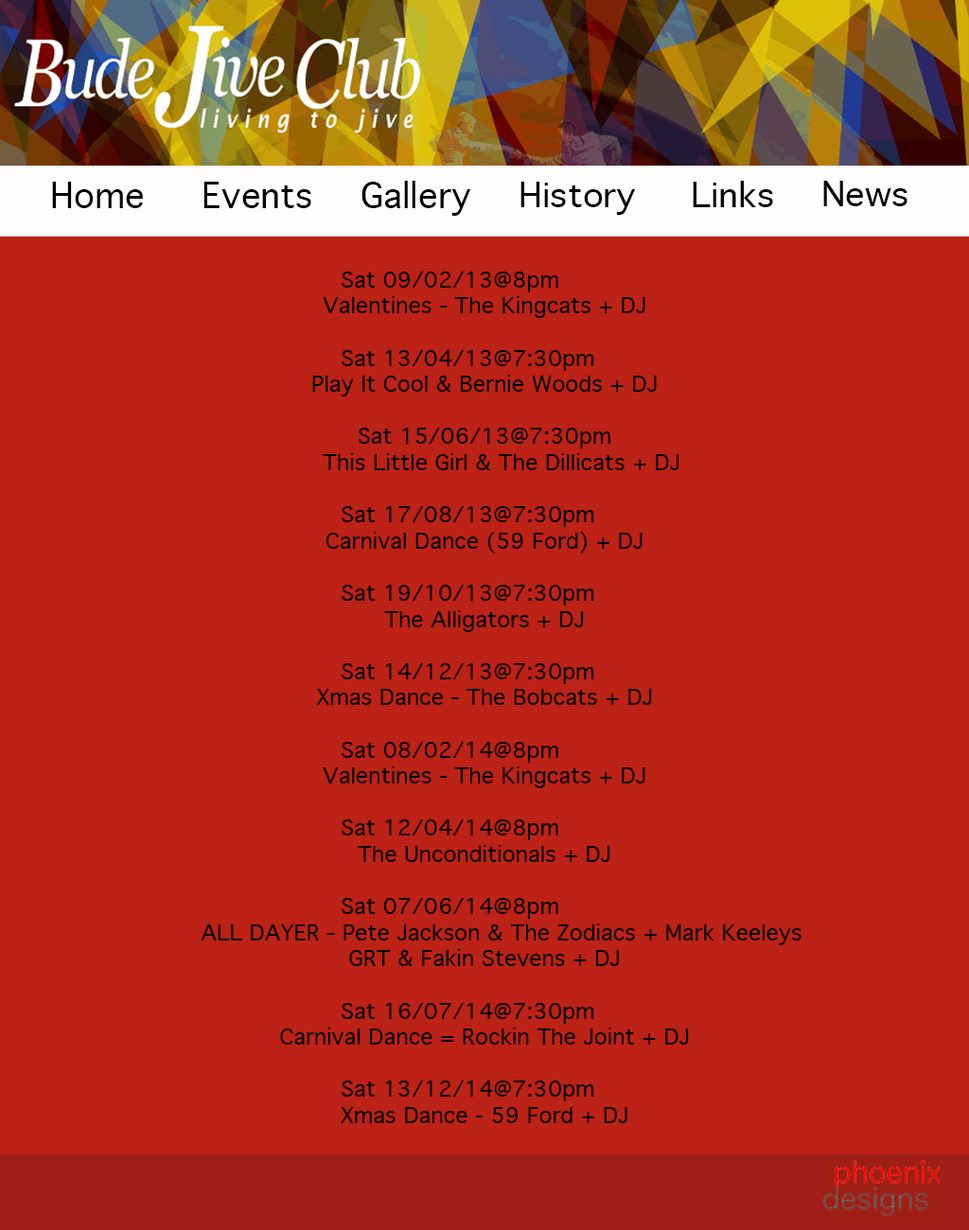
<style>
.page{position:relative;width:969px;height:1230px;background:#bc2215}
.page>*{position:absolute;margin:0}
.t1{font:33.9px "Geneva";color:#020000}
.t2{font:32.8px "Geneva";color:#020000;scale:1.04 1}
.t3{font:21.8px "Geneva";color:#000000}
</style>
<div class="page">
<p class="t1" style="left:52px;top:182px;width:91px;height:26px">Home</p>
<p class="t1" style="left:203px;top:182px;width:108px;height:26px">Events</p>
<p class="t1" style="left:362px;top:181px;width:108px;height:35px">Gallery</p>
<p class="t2" style="left:521px;top:182px;width:114px;height:33px">History</p>
<p class="t2" style="left:693px;top:181px;width:80px;height:26px">Links</p>
<p class="t2" style="left:823px;top:181px;width:85px;height:25px">News</p>
<p class="t3" style="left:201px;top:272px;width:601px;height:851px;text-align:center">Sat 09/02/13@8pm <br>Valentines - The Kingcats + DJ<br><br>          Sat 13/04/13@7:30pm <br>Play It Cool &amp; Bernie Woods + DJ<br><br>Sat 15/06/13@7:30pm<br> This Little Girl &amp; The Dillicats + DJ<br><br>          Sat 17/08/13@7:30pm <br>Carnival Dance (59 Ford) + DJ<br><br>          Sat 19/10/13@7:30pm <br>The Alligators + DJ<br><br>          Sat 14/12/13@7:30pm <br>Xmas Dance - The Bobcats + DJ<br><br>          Sat 08/02/14@8pm <br>Valentines - The Kingcats + DJ<br><br>          Sat 12/04/14@8pm <br>The Unconditionals + DJ<br><br>          Sat 07/06/14@8pm <br> ALL DAYER - Pete Jackson &amp; The Zodiacs + Mark Keeleys <br>GRT &amp; Fakin Stevens + DJ<br><br>          Sat 16/07/14@7:30pm <br>Carnival Dance = Rockin The Joint + DJ<br><br>          Sat 13/12/14@7:30pm <br>Xmas Dance - 59 Ford + DJ</p>
</div>
